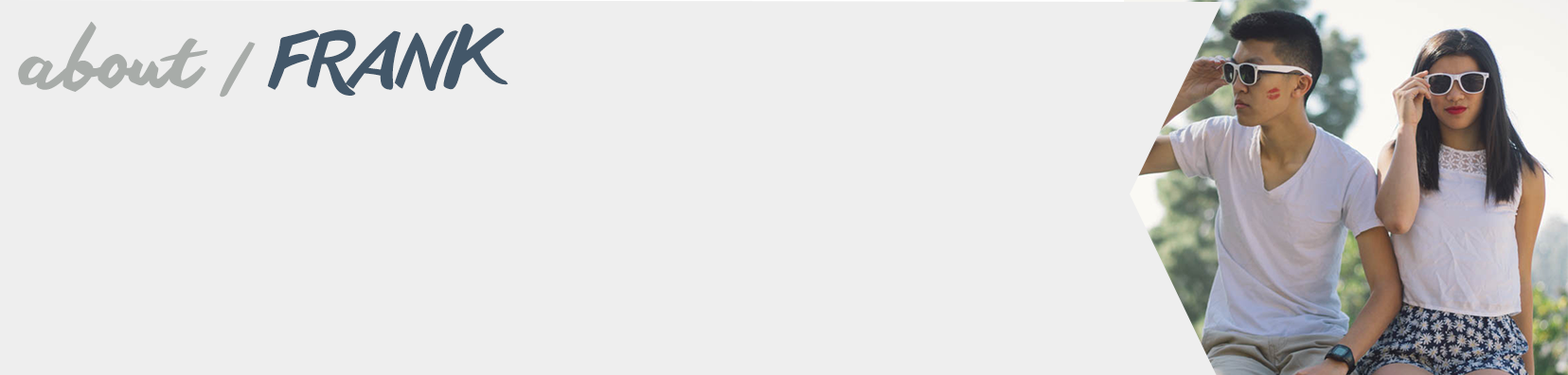
<style>
.page{position:relative;width:1568px;height:375px;background:#eeeeee}
.page>*{position:absolute;margin:0}
.t1{font:72px "anothershabby";color:#a8aca9}
.t2{font:72px "anothershabby";color:#435769}
</style>
<div class="page">
<p class="t1" style="left:18px;top:21px;width:490px;height:77px">about | <span class="t2">FRANK</span></p>
</div>
